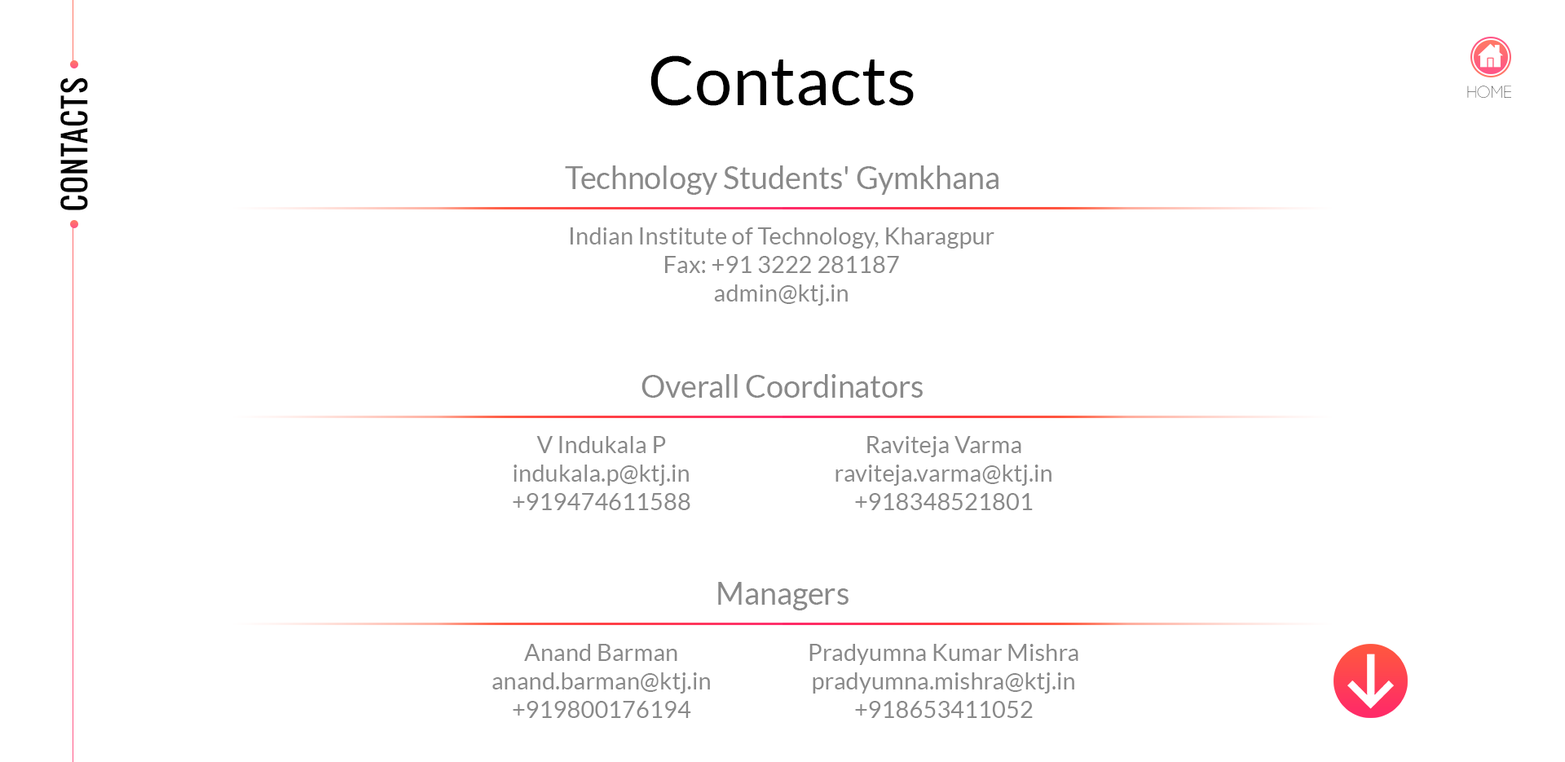
<style>
.page{position:relative;width:1565px;height:762px;background:#ffffff}
.page>*{position:absolute;margin:0}
.t1{font:67.9px "Lato-Regular";color:#000000}
.t2{font:30.6px "Oswald";letter-spacing:0.05em;color:#000000}
.t3{font:17px "Code-Light";letter-spacing:0.05em}
.t4{font:30.6px "Lato-Regular";color:#898989}
.t5{font:23.8px "Lato-Regular";color:#898989}
</style>
<div class="page">
<p class="t1" style="left:650px;top:55px;width:264px;height:51px">Contacts</p>
<p class="t2" style="left:60px;top:78px;width:28px;height:132px;rotate:-90deg">CONTACTS</p>
<p class="t3" style="left:1467px;top:86px;width:44px;height:12px">HOME</p>
<p class="t4" style="left:565px;top:165px;width:433px;height:30px">Technology Students' Gymkhana</p>
<p class="t5" style="left:571px;top:227px;width:423px;height:79px;text-align:center">Indian Institute of Technology, Kharagpur<br>Fax: +91 3222 281187<br>admin@ktj.in</p>
<p class="t4" style="left:641px;top:374px;width:282px;height:24px">Overall Coordinators</p>
<p class="t5" style="left:513px;top:436px;width:177px;height:74px;text-align:center">V Indukala P<br>  indukala.p@ktj.in  <br>+919474611588</p>
<p class="t5" style="left:835px;top:436px;width:216px;height:74px;text-align:center">Raviteja Varma<br>  raviteja.varma@ktj.in  <br>+918348521801</p>
<p class="t4" style="left:718px;top:582px;width:130px;height:28px">Managers</p>
<p class="t5" style="left:492px;top:644px;width:218px;height:74px;text-align:center">Anand Barman<br>  anand.barman@ktj.in  <br>+919800176194</p>
<p class="t5" style="left:809px;top:644px;width:269px;height:74px;text-align:center">Pradyumna Kumar Mishra<br>  pradyumna.mishra@ktj.in  <br>+918653411052</p>
</div>
